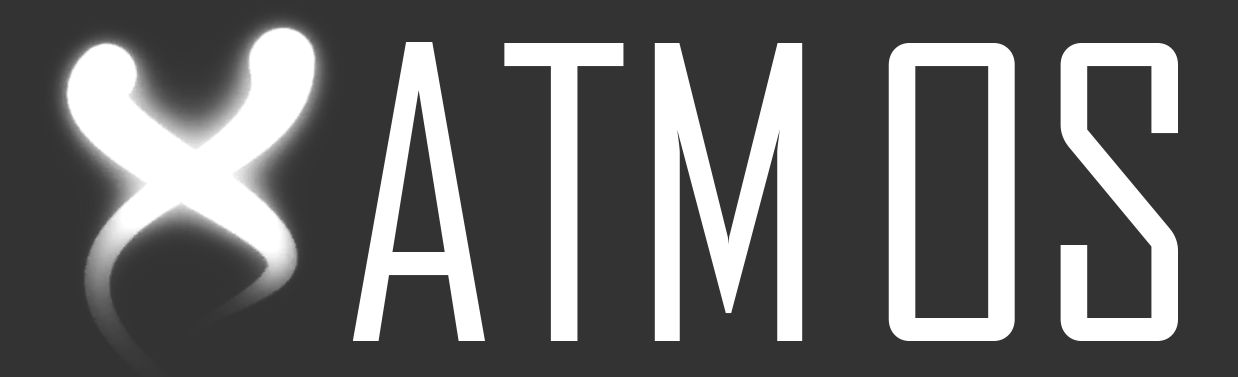
<style>
.page{position:relative;width:1238px;height:377px;background:#333333}
.page>*{position:absolute;margin:0}
.t1{font:390px "AgencyFB-Reg";color:#ffffff}
</style>
<div class="page">
<p class="t1" style="left:353px;top:42px;width:825px;height:299px">ATM OS</p>
</div>
